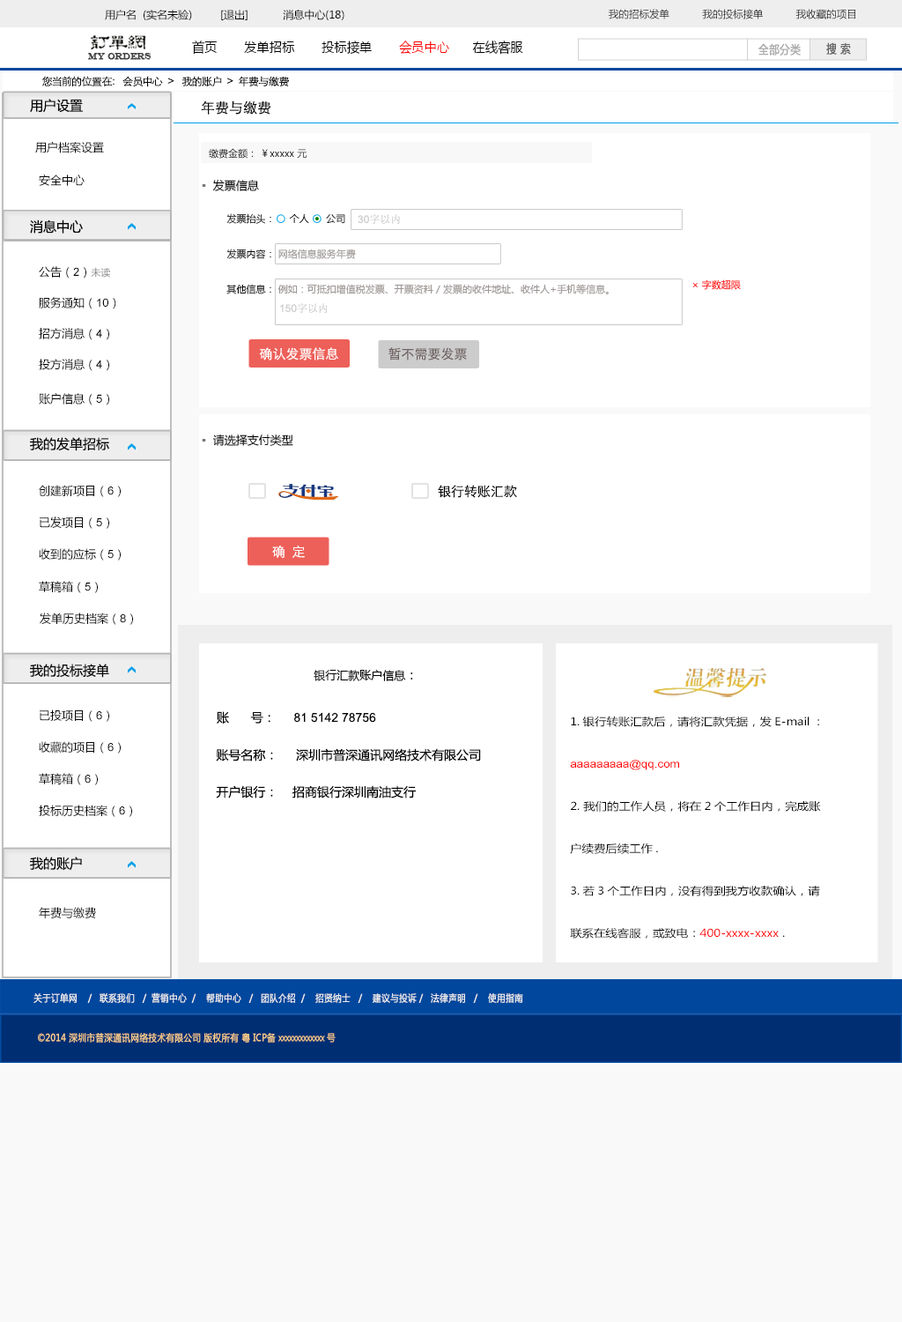
<style>
.page{position:relative;width:902px;height:1322px;background:#ffffff}
.page>*{position:absolute;margin:0}
.t1{font:10.6px "MicrosoftYaHei";color:#000000}
.t2{font:10.1px "MicrosoftYaHei";color:#000000}
.t3{font:13.6px "MicrosoftYaHei";color:#000000;font-variant:small-caps;scale:0.94 1}
.t4{font:13.6px "MicrosoftYaHei";color:#ff0000;font-variant:small-caps;scale:0.94 1}
.t5{font:8.7px "EngraversMT";color:#434343;font-variant:small-caps;font-weight:bold;scale:0.86 1}
.t6{font:11.6px "MicrosoftYaHei";color:#aaaaaa;font-variant:small-caps;font-weight:bold;scale:0.86 1}
.t7{font:11.6px "MicrosoftYaHei";color:#626262;font-variant:small-caps;font-weight:bold;scale:0.86 1}
.t8{font:10.6px "STXihei";color:#060606}
.t9{font:13.2px "MicrosoftYaHei";color:#060606}
.t10{font:14.1px "STXihei";color:#060606}
.t11{font:11.5px "MicrosoftYaHei";color:#060606}
.t12{font:9.7px "MicrosoftYaHei";color:#060606}
.t13{font:11.5px "MicrosoftYaHei";color:#7b7777}
.t14{font:9.7px/17.6px "MicrosoftYaHei";color:#9d9795}
.t15{font:11.5px/17.6px "MicrosoftYaHei";color:#060606}
.t16{font:9.7px/17.6px "MicrosoftYaHei";color:#060606}
.t17{font:10.6px "SimSun";color:#cccccc}
.t18{font:10.6px "ArialMT";color:#cccccc}
.t19{font:11.5px "ArialMT";color:#060606}
.t20{font:9.7px "MicrosoftYaHei";color:#888584}
.t21{font:9.7px "MicrosoftYaHei";color:#ff0000}
.t22{font:13.2px "STXihei";color:#ffffff}
.t23{font:13.2px "STXihei";color:#6e6161}
.t24{font:11.5px "MicrosoftYaHei";color:#000000}
.t25{font:13.2px "STXihei";color:#000000}
.t26{font:12.3px "MicrosoftYaHei";color:#000000}
.t27{font:12.3px "ArialMT";color:#000000}
.t28{font:10.6px/42.3px "MicrosoftYaHei";color:#000000;scale:1.12 1}
.t29{font:11.5px/42.3px "MicrosoftYaHei";color:#000000;scale:1.12 1}
.t30{font:10.6px/42.3px "ArialMT";color:#ff0000;scale:1.12 1}
.t31{font:10.6px/42.3px "MicrosoftYaHei";color:#ff0000;scale:1.12 1}
.t32{font:10.6px/42.3px "MicrosoftYaHei";color:#010000;scale:1.12 1}
.t33{font:9.7px "MicrosoftYaHei";color:#eeeeee;font-variant:small-caps;font-weight:bold;scale:0.86 1}
.t34{font:13.6px "STXihei";color:#eeeeee;font-variant:small-caps;font-weight:bold;scale:0.86 1}
.t35{font:9.7px "MicrosoftYaHei";color:#facd89;font-variant:small-caps;font-weight:bold;scale:0.87 1}
.t36{font:9.7px "MicrosoftYaHei";color:#eeeeee;font-variant:small-caps;font-weight:bold;scale:0.87 1}
</style>
<div class="page">
<p class="t1" style="left:105px;top:10px;width:240px;height:10px">用户名  (实名未验)         [退出]           消息中心(18)</p>
<p class="t2" style="left:609px;top:9px;width:247px;height:10px">我的招标发单           我的投标接单           我收藏的项目</p>
<p class="t3" style="left:192px;top:41px;width:331px;height:14px">首页       发单招标       投标接单       <span class="t4">会员中心</span>      在线客服</p>
<p class="t5" style="left:88px;top:53px;width:64px;height:7px">MY ORDERS</p>
<p class="t6" style="left:759px;top:43px;width:42px;height:13px">全部分类</p>
<p class="t7" style="left:826px;top:42px;width:25px;height:13px">搜 索</p>
<p class="t8" style="left:41px;top:76px;width:248px;height:11px">您当前的位置在：  会员中心  &gt;   我的账户  &gt;  年费与缴费</p>
<p class="t9" style="left:30px;top:99px;width:53px;height:14px">用户设置</p>
<p class="t10" style="left:201px;top:100px;width:70px;height:15px">年费与缴费</p>
<p class="t11" style="left:35px;top:141px;width:69px;height:12px">用户档案设置</p>
<p class="t12" style="left:209px;top:148px;width:99px;height:11px">缴费金额： ￥xxxxx 元</p>
<p class="t11" style="left:39px;top:174px;width:46px;height:12px">安全中心</p>
<p class="t11" style="left:202px;top:179px;width:57px;height:12px"><span class="t13">▪  </span>发票信息</p>
<p class="t9" style="left:30px;top:219px;width:53px;height:14px">消息中心</p>
<p class="t14" style="left:226px;top:213px;width:383px;height:81px"><span class="t15"><br><br></span><span class="t16">  发票抬头：     个人      公司<br><br>  发票内容： </span>网络信息服务年费<br><span class="t16"><br>  其他信息： </span>例如：可抵扣增值税发票、开票资料 / 发票的收件地址、收件人+手机等信息。</p>
<p class="t17" style="left:358px;top:214px;width:42px;height:11px"><span class="t18">30</span>字以内</p>
<p class="t11" style="left:39px;top:266px;width:71px;height:12px">公告（<span class="t19">2</span>）<span class="t20">未读</span></p>
<p class="t21" style="left:693px;top:279px;width:48px;height:11px">× 字数超限</p>
<p class="t11" style="left:39px;top:297px;width:77px;height:12px">服务通知（<span class="t19">10</span>）</p>
<p class="t18" style="left:280px;top:303px;width:48px;height:11px">150<span class="t17">字以内</span></p>
<p class="t11" style="left:39px;top:328px;width:70px;height:12px">招方消息（<span class="t19">4</span>）</p>
<p class="t22" style="left:259px;top:347px;width:79px;height:13px">确认发票信息</p>
<p class="t23" style="left:389px;top:347px;width:78px;height:13px">暂不需要发票</p>
<p class="t11" style="left:39px;top:359px;width:70px;height:12px">投方消息（<span class="t19">4</span>）</p>
<p class="t11" style="left:39px;top:393px;width:70px;height:12px">账户信息（<span class="t19">5</span>）</p>
<p class="t9" style="left:30px;top:437px;width:79px;height:14px">我的发单招标</p>
<p class="t24" style="left:202px;top:433px;width:91px;height:13px">▪  请选择支付类型</p>
<p class="t11" style="left:39px;top:485px;width:82px;height:12px">创建新项目（<span class="t19">6</span>）</p>
<p class="t25" style="left:438px;top:485px;width:79px;height:13px">银行转账汇款</p>
<p class="t11" style="left:40px;top:516px;width:69px;height:13px">已发项目（<span class="t19">5</span>）</p>
<p class="t22" style="left:272px;top:545px;width:33px;height:13px">确  定</p>
<p class="t11" style="left:39px;top:548px;width:82px;height:12px">收到的应标（<span class="t19">5</span>）</p>
<p class="t11" style="left:39px;top:581px;width:59px;height:12px">草稿箱（<span class="t19">5</span>）</p>
<p class="t11" style="left:40px;top:612px;width:93px;height:13px">发单历史档案（<span class="t19">8</span>）</p>
<p class="t9" style="left:30px;top:663px;width:79px;height:15px">我的投标接单</p>
<p class="t24" style="left:314px;top:670px;width:99px;height:11px">银行汇款账户信息<span class="t26">：</span></p>
<p class="t11" style="left:40px;top:709px;width:69px;height:13px">已投项目（<span class="t19">6</span>）</p>
<p class="t27" style="left:217px;top:711px;width:159px;height:12px"><span class="t26">账      号：     </span>81 5142 78756</p>
<p class="t28" style="left:570px;top:715px;width:251px;height:223px"><span class="t29"><br></span>1.银行转账汇款后，请将汇款凭据，发E-mail  :      <span class="t30">aaaaaaaaa@qq.com <br></span>2. 我们的工作人员，将在2个工作日内，完成账户续费后续工作.<br>3.若3个工作日内，没有得到我方收款确认，请联系在线客服，或致电：<span class="t31">400-xxxx-xxxx</span><span class="t32"> .</span></p>
<p class="t11" style="left:39px;top:741px;width:82px;height:12px">收藏的项目（<span class="t19">6</span>）</p>
<p class="t26" style="left:216px;top:748px;width:265px;height:13px">账号名称：     深圳市普深通讯网络技术有限公司</p>
<p class="t11" style="left:39px;top:773px;width:59px;height:12px">草稿箱（<span class="t19">6</span>）</p>
<p class="t26" style="left:216px;top:785px;width:200px;height:13px">开户银行：    招商银行深圳南油支行</p>
<p class="t11" style="left:39px;top:804px;width:93px;height:13px">投标历史档案（<span class="t19">6</span>）</p>
<p class="t9" style="left:30px;top:856px;width:52px;height:15px">我的账户</p>
<p class="t11" style="left:39px;top:907px;width:57px;height:11px">年费与缴费</p>
<p class="t33" style="left:33px;top:992px;width:490px;height:11px"><span class="t34"><br><br></span>关于订单网    /   联系我们   /  营销中心  /    帮助中心   /   团队介绍  /    招贤纳士   /    建议与投诉 /   法律声明   /    使用指南</p>
<p class="t35" style="left:38px;top:1033px;width:298px;height:9px"><span class="t36"> </span>©2014 深圳市普深通讯网络技术有限公司 版权所有 粤 ICP备 xxxxxxxxxxxxx 号</p>
</div>
